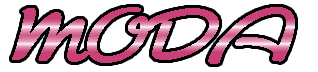
<style>
.page{position:relative;width:318px;height:72px;background:#ffffff}
.page>*{position:absolute;margin:0}
.t1{font:64.9px "Cuisine";scale:1.16 1}
</style>
<div class="page">
<p class="t1" style="left:12px;top:7px;width:283px;height:57px">MODA</p>
</div>
